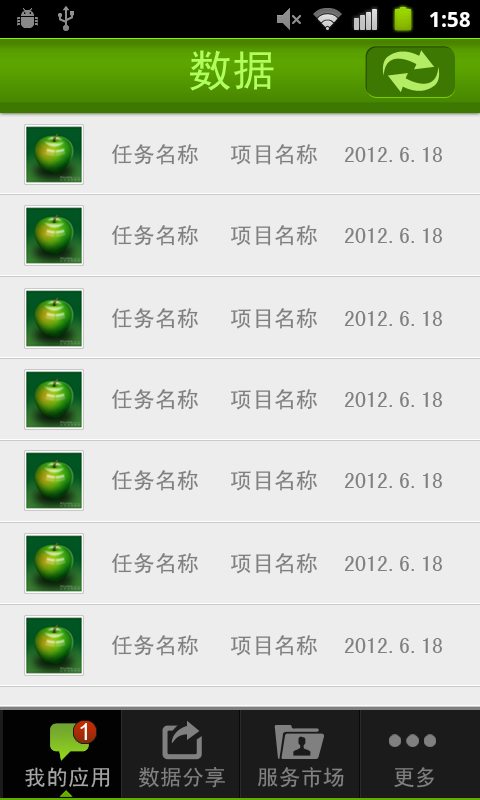
<style>
.page{position:relative;width:480px;height:800px;background:#eeeded}
.page>*{position:absolute;margin:0}
.t1{font:44px "SimHei";color:#b0ff5f}
.t2{font:22px "SimHei";color:#808080}
.t3{font:23px "ArialMT";color:#fffefe}
.t4{font:22px "SimHei";color:#a6a6a6}
</style>
<div class="page">
<p class="t1" style="left:190px;top:50px;width:84px;height:41px">数据</p>
<p class="t2" style="left:111px;top:144px;width:87px;height:21px">任务名称</p>
<p class="t2" style="left:231px;top:144px;width:86px;height:21px">项目名称</p>
<p class="t2" style="left:344px;top:147px;width:98px;height:15px">2012.6.18</p>
<p class="t2" style="left:111px;top:225px;width:87px;height:21px">任务名称</p>
<p class="t2" style="left:231px;top:225px;width:86px;height:21px">项目名称</p>
<p class="t2" style="left:344px;top:228px;width:98px;height:15px">2012.6.18</p>
<p class="t2" style="left:111px;top:308px;width:87px;height:21px">任务名称</p>
<p class="t2" style="left:231px;top:308px;width:86px;height:21px">项目名称</p>
<p class="t2" style="left:344px;top:311px;width:98px;height:15px">2012.6.18</p>
<p class="t2" style="left:111px;top:389px;width:87px;height:21px">任务名称</p>
<p class="t2" style="left:231px;top:389px;width:86px;height:21px">项目名称</p>
<p class="t2" style="left:344px;top:392px;width:98px;height:15px">2012.6.18</p>
<p class="t2" style="left:111px;top:470px;width:87px;height:21px">任务名称</p>
<p class="t2" style="left:231px;top:470px;width:86px;height:21px">项目名称</p>
<p class="t2" style="left:344px;top:473px;width:98px;height:15px">2012.6.18</p>
<p class="t2" style="left:111px;top:553px;width:87px;height:21px">任务名称</p>
<p class="t2" style="left:231px;top:553px;width:86px;height:21px">项目名称</p>
<p class="t2" style="left:344px;top:556px;width:98px;height:15px">2012.6.18</p>
<p class="t2" style="left:111px;top:635px;width:87px;height:21px">任务名称</p>
<p class="t2" style="left:231px;top:635px;width:86px;height:21px">项目名称</p>
<p class="t2" style="left:344px;top:638px;width:98px;height:15px">2012.6.18</p>
<p class="t3" style="left:80px;top:723px;width:7px;height:17px">1</p>
<p class="t4" style="left:25px;top:767px;width:85px;height:21px">我的应用</p>
<p class="t2" style="left:139px;top:767px;width:86px;height:21px">数据分享</p>
<p class="t2" style="left:258px;top:767px;width:86px;height:21px">服务市场</p>
<p class="t2" style="left:394px;top:767px;width:40px;height:21px">更多</p>
</div>
